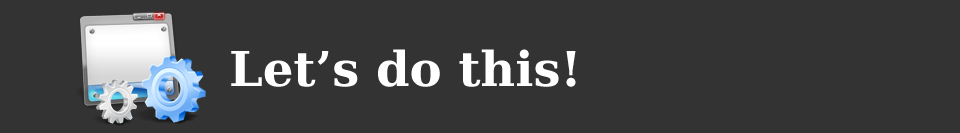
<style>
.page{position:relative;width:960px;height:133px;background:#333333}
.page>*{position:absolute;margin:0}
.t1{font:48px "BitstreamVeraSerif-Bold";color:#ffffff}
</style>
<div class="page">
<p class="t1" style="left:231px;top:49px;width:345px;height:38px">Let’s do this!</p>
</div>
